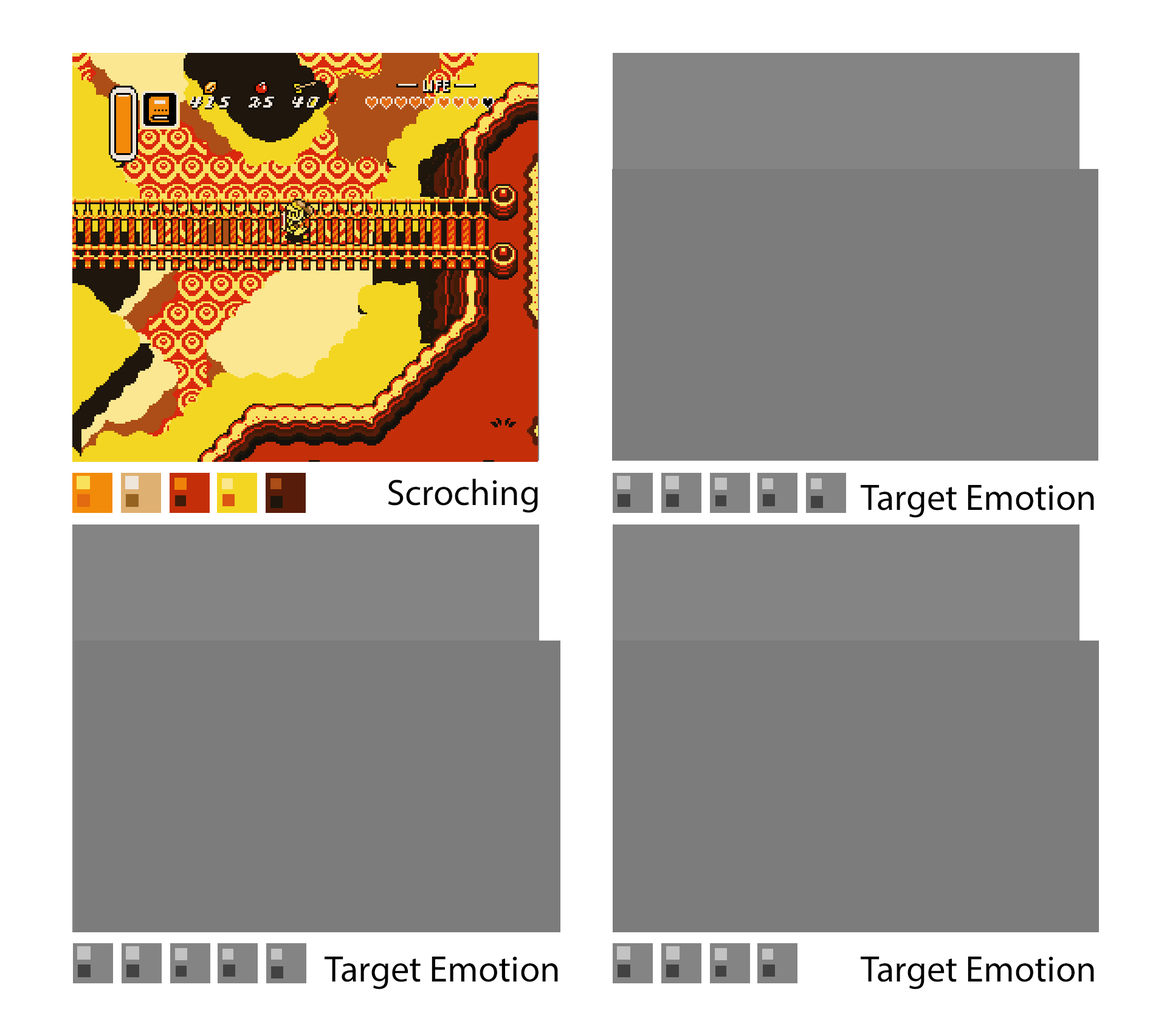
<style>
.page{position:relative;width:1167px;height:1021px;background:#7c7c7c}
.page>*{position:absolute;margin:0}
.t1{font:36.9px "MyriadPro-Regular";color:#000000}
</style>
<div class="page">
<p class="t1" style="left:388px;top:479px;width:150px;height:34px">Scroching</p>
<p class="t1" style="left:861px;top:485px;width:233px;height:33px">Target Emotion</p>
<p class="t1" style="left:325px;top:957px;width:233px;height:33px">Target Emotion</p>
<p class="t1" style="left:861px;top:957px;width:233px;height:33px">Target Emotion</p>
</div>
